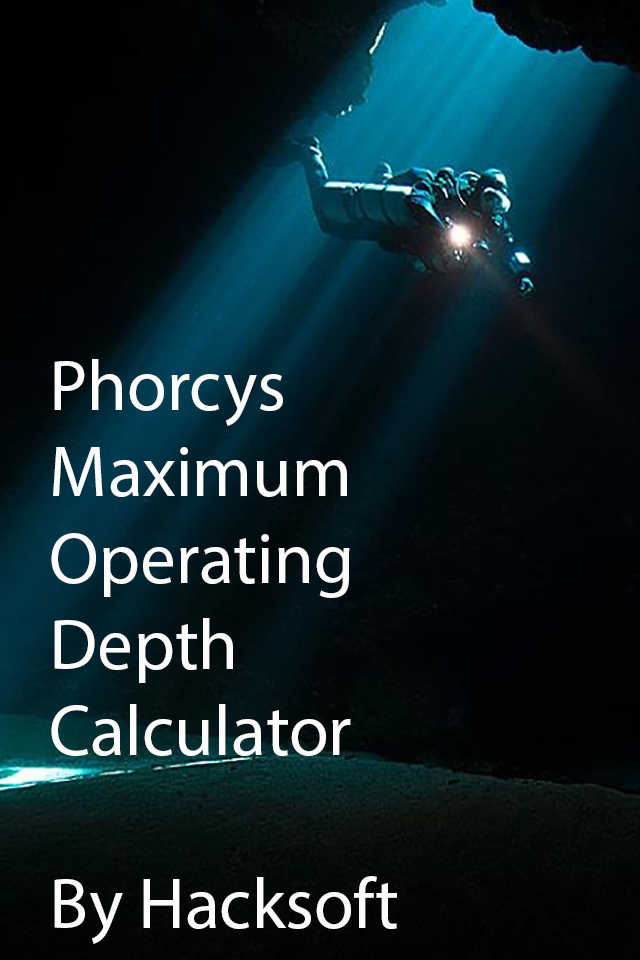
<style>
.page{position:relative;width:640px;height:960px}
.page>*{position:absolute;margin:0}
.t1{font:72px "MyriadPro-Regular";color:#fdfcfc}
</style>
<div class="page">
<p class="t1" style="left:51px;top:359px;width:346px;height:585px">Phorcys <br>Maximum<br>Operating <br>Depth<br>Calculator<br><br>By Hacksoft</p>
</div>
